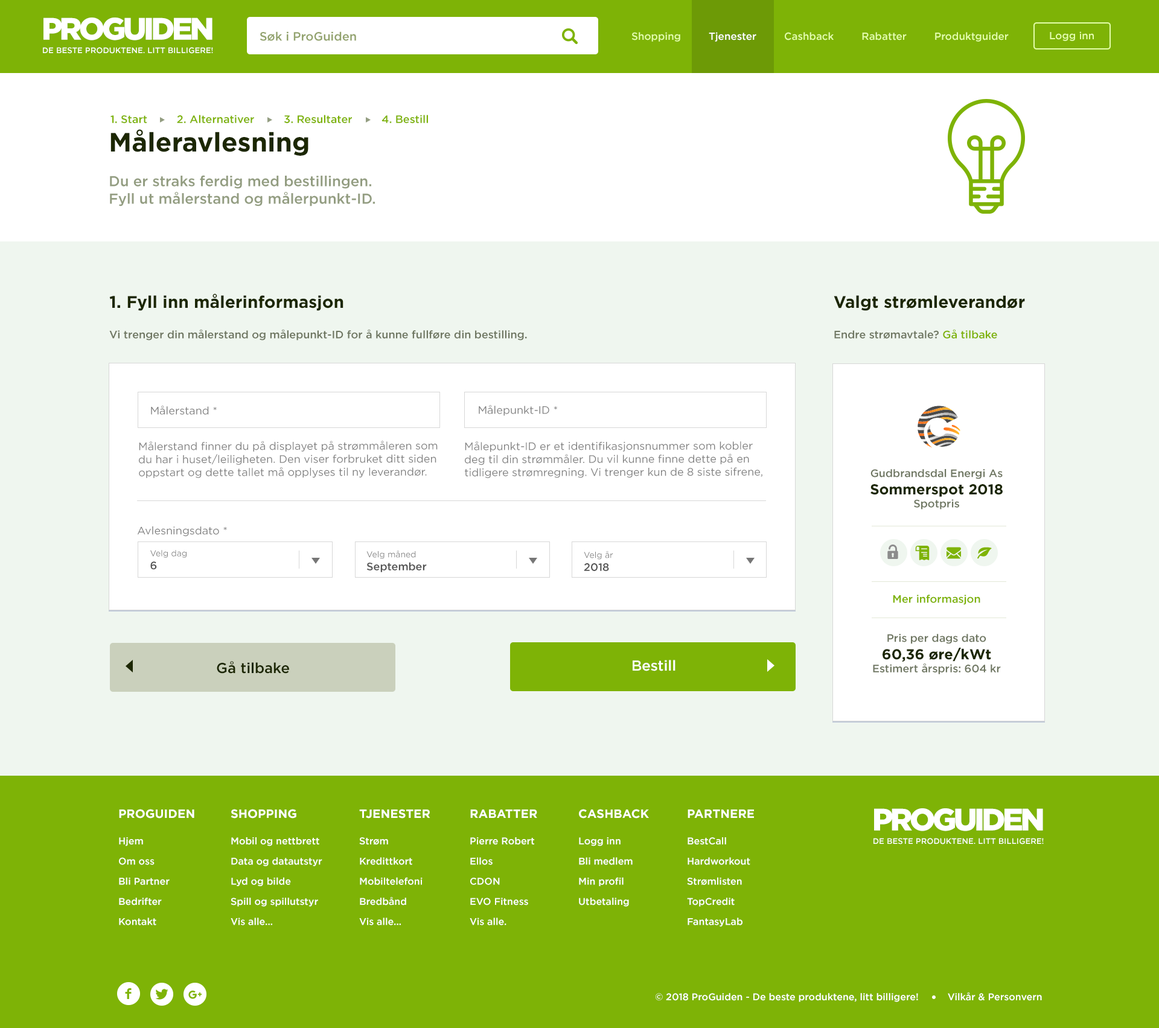
<style>
.page{position:relative;width:1159px;height:1028px;background:#ffffff}
.page>*{position:absolute;margin:0}
.t1{font:8px/13.4px "Gotham-Medium";color:#ffffff}
.t2{font:31px/51.4px "Gotham-Black";letter-spacing:-0.09em;color:#ffffff}
.t3{font:12.1px "Gotham-Medium";color:#93a36e}
.t4{font:10.3px "Gotham-Medium";color:#e4feaa}
.t5{font:10.3px "Gotham-Medium";color:#ffffff}
.t6{font:10.9px "Gotham-Medium";color:#7eb306}
.t7{font:14.5px "Gotham-Medium";color:#939d81}
.t8{font:26.6px "Gotham-Bold";color:#1c2702}
.t9{font:10.9px "Gotham-Medium";color:#6f7762}
.t10{font:16.9px "Gotham-Bold";color:#1c2702}
.t11{font:10.9px "Gotham-Book";color:#818181}
.t12{font:14.5px "Gotham-Bold";color:#1c2702}
.t13{font:8.5px "Gotham-Book";color:#828282}
.t14{font:10.9px "Gotham-Medium";color:#535353}
.t15{font:14.5px "Gotham-Medium";color:#1c2702}
.t16{font:14.5px "Gotham-Medium";color:#ffffff}
.t17{font:9.7px/20.2px "Gotham-Medium";color:#ffffff}
.t18{font:12.1px/6.3px "Gotham-Bold";color:#ffffff}
.t19{font:9.7px "Gotham-Medium";color:#ffffff}
</style>
<div class="page">
<p class="t1" style="left:43px;top:18px;width:170px;height:36px;text-align:center"><span class="t2">PROGUIDEN<br></span>DE BESTE PRODUKTENE. LITT BILLIGERE!</p>
<p class="t3" style="left:260px;top:31px;width:96px;height:10px">Søk i ProGuiden</p>
<p class="t4" style="left:632px;top:32px;width:377px;height:10px">Shopping         <span class="t5">Tjenester</span>         Cashback         Rabatter         Produktguider</p>
<p class="t4" style="left:1050px;top:31px;width:44px;height:10px">Logg inn</p>
<p class="t6" style="left:111px;top:115px;width:317px;height:8px">1. Start         2. Alternativer         3. Resultater         4. Bestill</p>
<p class="t7" style="left:110px;top:129px;width:265px;height:78px"><span class="t8">Måleravlesning<br></span><br>Du er straks ferdig med bestillingen.<br>Fyll ut målerstand og målerpunkt-ID.</p>
<p class="t9" style="left:109px;top:293px;width:418px;height:48px"><span class="t10">1. Fyll inn målerinformasjon<br><br></span>Vi trenger din målerstand og målepunkt-ID for å kunne fullføre din bestilling.</p>
<p class="t10" style="left:834px;top:295px;width:191px;height:44px">Valgt strømleverandør<br><br><span class="t9">Endre strømavtale? </span><span class="t6">Gå tilbake</span></p>
<p class="t11" style="left:151px;top:406px;width:66px;height:9px">Målerstand *</p>
<p class="t11" style="left:479px;top:405px;width:78px;height:11px">Målepunkt-ID *</p>
<p class="t11" style="left:139px;top:441px;width:299px;height:37px">Målerstand finner du på displayet på strømmåleren som du har i huset/leiligheten. Den viser forbruket ditt siden oppstart og dette tallet må opplyses til ny leverandør.</p>
<p class="t11" style="left:465px;top:441px;width:298px;height:37px">Målepunkt-ID er et identifikasjonsnummer som kobler deg til din strømmåler. Du vil kunne finne dette på en tidligere strømregning. Vi trenger kun de 8 siste sifrene, da de første 10 er felles for alle.</p>
<p class="t9" style="left:871px;top:469px;width:132px;height:206px;text-align:center">Gudbrandsdal Energi As<br><span class="t12">Sommerspot 2018<br></span>Spotpris<br><br><br><br><br><br><br><br><br><br><span class="t6">Mer informasjon<br><br><br></span>Pris per dags dato<br><span class="t12">60,36 øre/kWt<br></span>Estimert årspris: 604 kr<br><br>kr<br>: 298 kr</p>
<p class="t11" style="left:137px;top:527px;width:90px;height:10px">Avlesningsdato *</p>
<p class="t13" style="left:150px;top:550px;width:37px;height:20px">Velg dag<br><span class="t14">6</span></p>
<p class="t13" style="left:367px;top:551px;width:60px;height:21px">Velg måned<br><span class="t14">September</span></p>
<p class="t13" style="left:584px;top:551px;width:30px;height:20px">Velg år<br><span class="t14">2018</span></p>
<p class="t15" style="left:217px;top:661px;width:72px;height:13px">Gå tilbake</p>
<p class="t16" style="left:633px;top:660px;width:43px;height:12px">Bestill</p>
<p class="t17" style="left:119px;top:809px;width:75px;height:117px"><span class="t18">PROGUIDEN<br><br></span>Hjem<br>Om oss<br>Bli Partner<br>Bedrifter<br>Kontakt</p>
<p class="t17" style="left:231px;top:809px;width:91px;height:117px"><span class="t18">SHOPPING<br><br></span>Mobil og nettbrett<br>Data og datautstyr<br>Lyd og bilde<br>Spill og spillutstyr<br>Vis alle...</p>
<p class="t17" style="left:359px;top:809px;width:72px;height:117px"><span class="t18">TJENESTER<br><br></span>Strøm<br>Kredittkort<br>Mobiltelefoni<br>Bredbånd <br>Vis alle...</p>
<p class="t17" style="left:470px;top:810px;width:67px;height:116px"><span class="t18">RABATTER<br><br></span>Pierre Robert<br>Ellos<br>CDON<br>EVO Fitness<br>Vis alle.</p>
<p class="t17" style="left:579px;top:809px;width:70px;height:98px"><span class="t18">CASHBACK <br><br></span>Logg inn<br>Bli medlem<br>Min profil<br>Utbetaling</p>
<p class="t17" style="left:687px;top:810px;width:67px;height:117px"><span class="t18">PARTNERE<br><br></span>BestCall<br>Hardworkout<br>Strømlisten<br>TopCredit<br>FantasyLab</p>
<p class="t1" style="left:874px;top:809px;width:170px;height:36px;text-align:center"><span class="t2">PROGUIDEN<br></span>DE BESTE PRODUKTENE. LITT BILLIGERE!</p>
<p class="t19" style="left:656px;top:993px;width:386px;height:9px">© 2018 ProGuiden - De beste produktene, litt billigere!          Vilkår &amp; Personvern</p>
</div>
